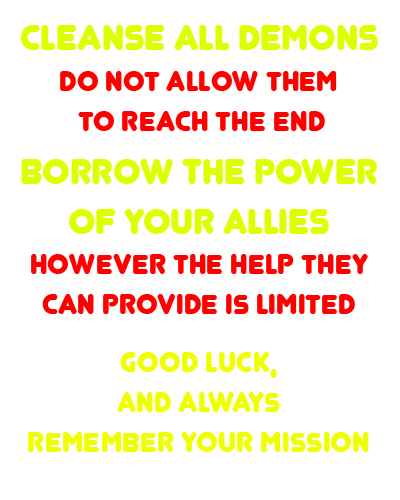
<style>
.page{position:relative;width:400px;height:500px;background:#ffffff}
.page>*{position:absolute;margin:0}
.t1{font:41.7px "Junegull";color:#ddff00}
.t2{font:33.3px "Junegull";color:#ff0000}
.t3{font:33.3px "Junegull";color:#f0ff00}
</style>
<div class="page">
<p class="t1" style="left:20px;top:25px;width:358px;height:25px">CLEANSE ALL DEMONS</p>
<p class="t2" style="left:60px;top:71px;width:277px;height:60px;text-align:center">DO NOT ALLOW THEM <br>TO REACH THE END</p>
<p class="t1" style="left:21px;top:159px;width:356px;height:75px;text-align:center">BORROW THE POWER<br>OF YOUR ALLIES</p>
<p class="t2" style="left:31px;top:254px;width:337px;height:60px;text-align:center">HOWEVER THE HELP THEY<br>CAN PROVIDE IS LIMITED</p>
<p class="t3" style="left:28px;top:352px;width:341px;height:100px;text-align:center">GOOD LUCK,<br>AND ALWAYS<br>REMEMBER YOUR MISSION</p>
</div>
